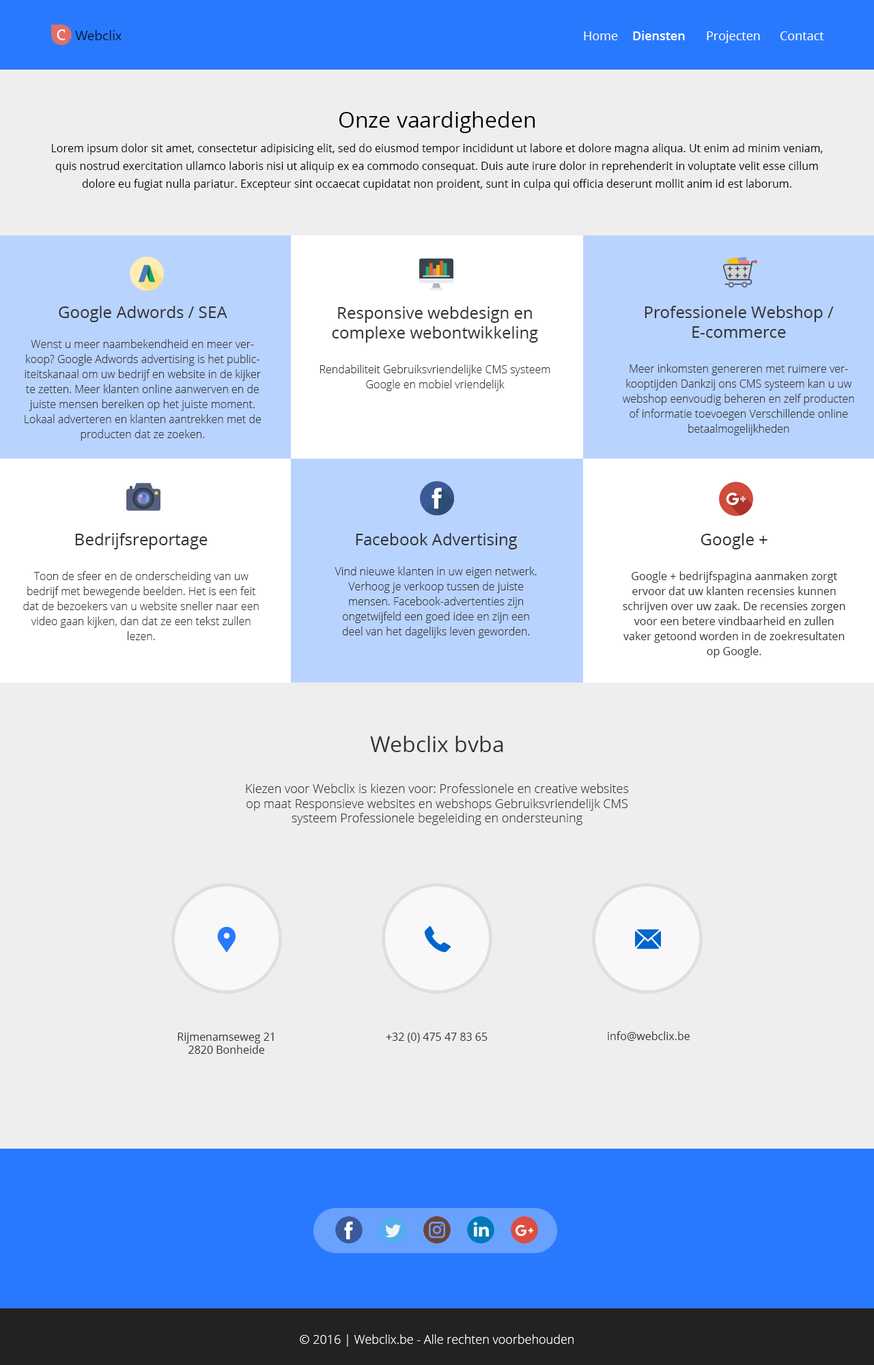
<style>
.page{position:relative;width:874px;height:1365px;background:#eeeeee}
.page>*{position:absolute;margin:0}
.t1{font:12.3px "OpenSans";color:#ffffff}
.t2{font:12.3px "OpenSans-Semibold";color:#ffffff}
.t3{font:10.9px/17.7px "OpenSans";color:#000000}
.t4{font:21.8px/28.7px "OpenSans";color:#000000}
.t5{font:10.9px/15px "OpenSans-Light";color:#333333}
.t6{font:16.4px "OpenSans";color:#333333}
.t7{font:10.9px/15px "OpenSans";color:#333333}
.t8{font:12.3px "OpenSans-Light";color:#333333}
.t9{font:21.8px "OpenSans";color:#333333}
.t10{font:10.9px "OpenSans";color:#333333}
.t11{font:12.3px "OpenSans-Light";color:#ffffff}
</style>
<div class="page">
<p class="t1" style="left:584px;top:31px;width:240px;height:12px">Home <span class="t2">Diensten</span> Projecten Contact</p>
<p class="t3" style="left:52px;top:111px;width:770px;height:79px;text-align:center"><span class="t4">Onze vaardigheden<br><br></span>Lorem ipsum dolor sit amet, consectetur adipisicing elit, sed do eiusmod tempor incididunt ut labore et dolore magna aliqua. Ut enim ad minim veniam, quis nostrud exercitation ullamco laboris nisi ut aliquip ex ea commodo consequat. Duis aute irure dolor in reprehenderit in voluptate velit esse cillum dolore eu fugiat nulla pariatur. Excepteur sint occaecat cupidatat non proident, sunt in culpa qui officia deserunt mollit anim id est laborum.</p>
<p class="t5" style="left:25px;top:306px;width:236px;height:135px;text-align:center"><span class="t6">Google Adwords / SEA<br><br></span>Wenst u meer naambekendheid en meer verkoop? Google Adwords advertising is het publiciteitskanaal om uw bedrijf en website in de kijker te zetten. Meer klanten online aanwerven en de juiste mensen bereiken op het juiste moment. Lokaal adverteren en klanten aantrekken met de producten dat ze zoeken.</p>
<p class="t5" style="left:622px;top:306px;width:232px;height:129px;text-align:center"><span class="t6">Professionele Webshop / E-commerce<br><br></span>Meer inkomsten genereren met ruimere verkooptijden Dankzij ons CMS systeem kan u uw webshop eenvoudig beheren en zelf producten of informatie toevoegen Verschillende online betaalmogelijkheden</p>
<p class="t5" style="left:320px;top:306px;width:230px;height:85px;text-align:center"><span class="t6">Responsive webdesign en <br>complexe webontwikkeling<br><br></span>Rendabiliteit Gebruiksvriendelijke CMS systeem Google en mobiel vriendelijk</p>
<p class="t5" style="left:23px;top:533px;width:236px;height:107px;text-align:center"><span class="t6">Bedrijfsreportage<br><br></span>Toon de sfeer en de onderscheiding van uw bedrijf met bewegende beelden. Het is een feit dat de bezoekers van u website sneller naar een video gaan kijken, dan dat ze een tekst zullen lezen.</p>
<p class="t5" style="left:334px;top:533px;width:202px;height:105px;text-align:center"><span class="t6">Facebook Advertising<br><br></span>Vind nieuwe klanten in uw eigen netwerk. Verhoog je verkoop tussen de juiste mensen. Facebook-advertenties zijn ongetwijfeld een goed idee en zijn een deel van het dagelijks leven geworden.</p>
<p class="t7" style="left:622px;top:533px;width:223px;height:125px;text-align:center"><span class="t6">Google +<br><br></span>Google + bedrijfspagina aanmaken zorgt ervoor dat uw klanten recensies kunnen schrijven over uw zaak. De recensies zorgen voor een betere vindbaarheid en zullen vaker getoond worden in de zoekresultaten op Google.</p>
<p class="t8" style="left:246px;top:736px;width:383px;height:89px;text-align:center"><span class="t9">Webclix bvba<br><br></span>Kiezen voor Webclix is kiezen voor: Professionele en creative websites op maat Responsieve websites en webshops Gebruiksvriendelijk CMS systeem Professionele begeleiding en ondersteuning​</p>
<p class="t10" style="left:177px;top:1033px;width:97px;height:21px;text-align:center">Rijmenamseweg 21<br>2820 Bonheide</p>
<p class="t10" style="left:386px;top:1033px;width:101px;height:10px">+32 (0) 475 47 83 65</p>
<p class="t10" style="left:607px;top:1031px;width:82px;height:10px">info@webclix.be</p>
<p class="t11" style="left:300px;top:1334px;width:273px;height:13px">© 2016 | Webclix.be - Alle rechten voorbehouden</p>
</div>
